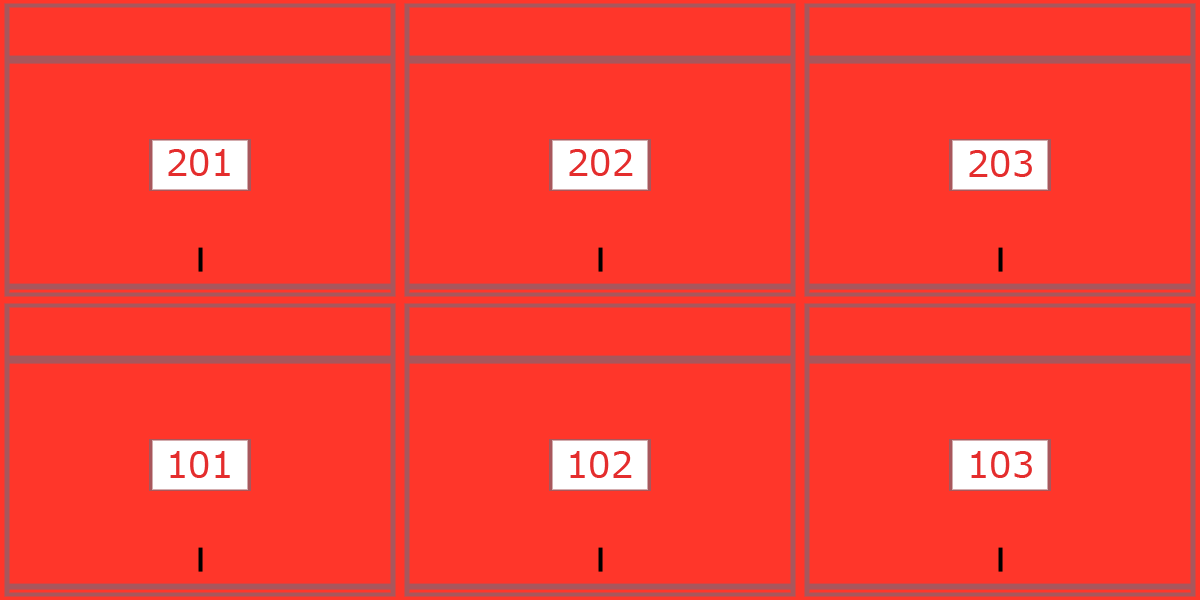
<style>
.page{position:relative;width:1200px;height:600px;background:#ff362a}
.page>*{position:absolute;margin:0}
.t1{font:36px "Meiryo";color:#e42d2d}
</style>
<div class="page">
<p class="t1" style="left:168px;top:149px;width:62px;height:27px">201</p>
<p class="t1" style="left:569px;top:149px;width:64px;height:27px">202</p>
<p class="t1" style="left:969px;top:150px;width:63px;height:27px">203</p>
<p class="t1" style="left:170px;top:451px;width:60px;height:27px">101</p>
<p class="t1" style="left:570px;top:451px;width:62px;height:27px">102</p>
<p class="t1" style="left:971px;top:451px;width:61px;height:27px">103</p>
</div>
